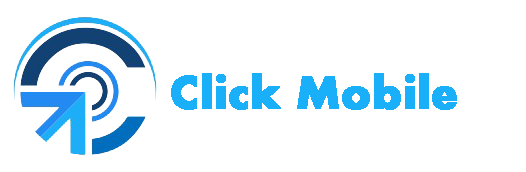
<style>
.page{position:relative;width:526px;height:172px;background:#ffffff}
.page>*{position:absolute;margin:0}
.t1{font:48px "AharoniBold";color:#19b0f9;font-weight:bold}
</style>
<div class="page">
<p class="t1" style="left:171px;top:73px;width:286px;height:37px">Click Mobile</p>
</div>
